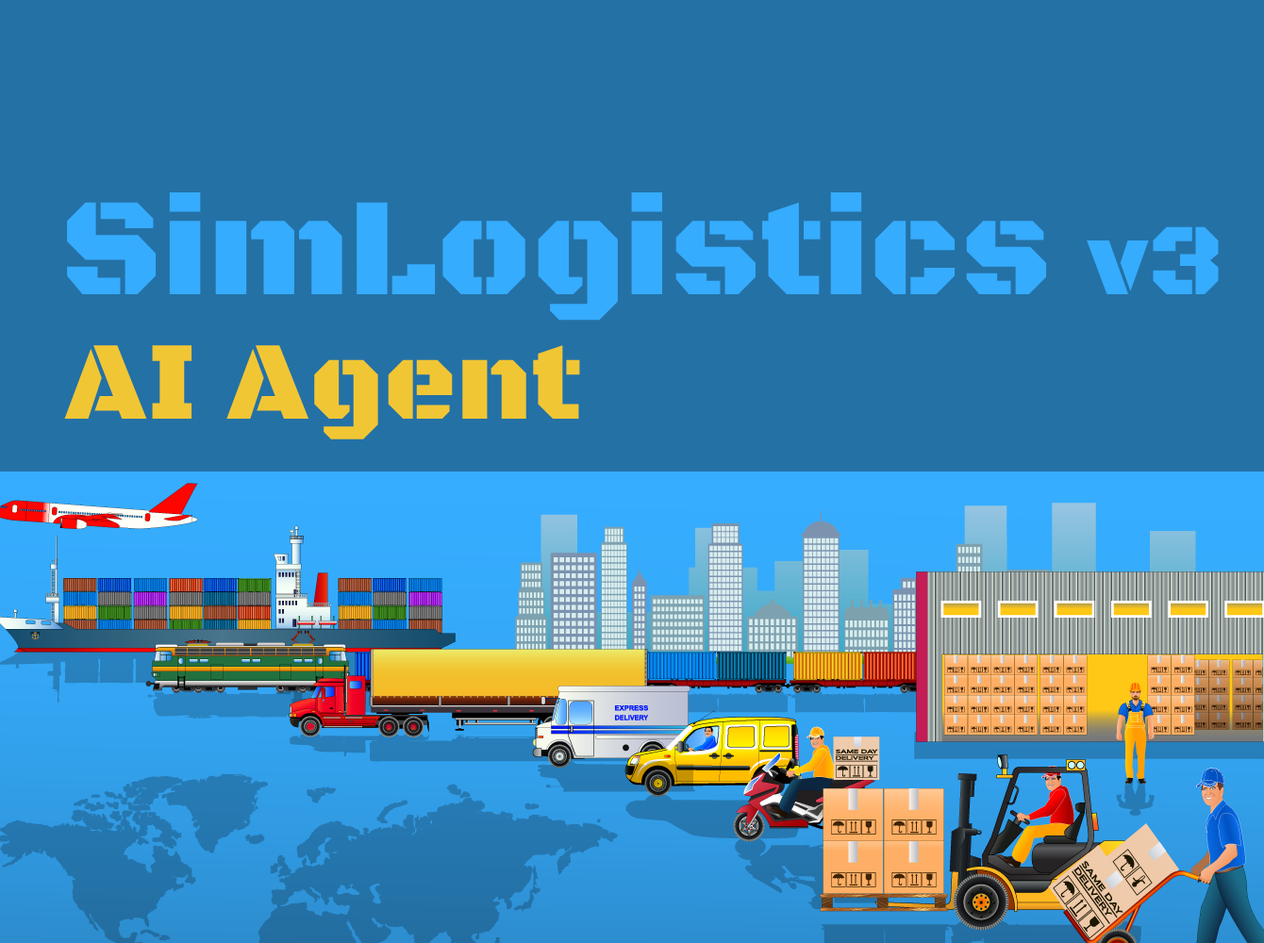
<style>
.page{position:relative;width:1264px;height:943px;background:#2471a6}
.page>*{position:absolute;margin:0}
.t1{font:141.5px "BlackOpsOne-Regular";color:#36acfe}
.t2{font:103.8px "BlackOpsOne-Regular";color:#36acfe}
.t3{font:113.2px "BlackOpsOne-Regular";color:#f1c635}
</style>
<div class="page">
<p class="t1" style="left:67px;top:191px;width:1152px;height:130px">SimLogistics <span class="t2">v3</span></p>
<p class="t3" style="left:64px;top:345px;width:516px;height:95px">AI Agent</p>
</div>
